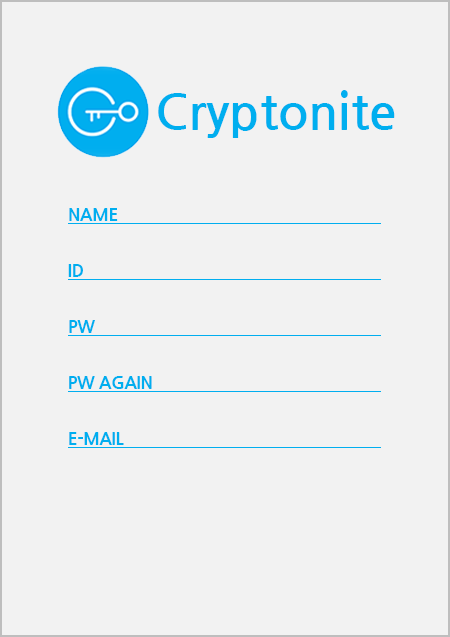
<style>
.page{position:relative;width:450px;height:637px;background:#f2f2f2}
.page>*{position:absolute;margin:0}
.t1{font:50px "NanumGothicBold";color:#00aeef}
.t2{font:16.7px "NanumGothicExtraBold";color:#00aeef}
</style>
<div class="page">
<p class="t1" style="left:158px;top:90px;width:237px;height:48px">Cryptonite</p>
<p class="t2" style="left:69px;top:208px;width:49px;height:13px">NAME</p>
<p class="t2" style="left:68px;top:264px;width:15px;height:13px">ID</p>
<p class="t2" style="left:69px;top:320px;width:26px;height:13px">PW</p>
<p class="t2" style="left:69px;top:376px;width:83px;height:13px">PW AGAIN</p>
<p class="t2" style="left:69px;top:432px;width:55px;height:13px">E-MAIL</p>
</div>
